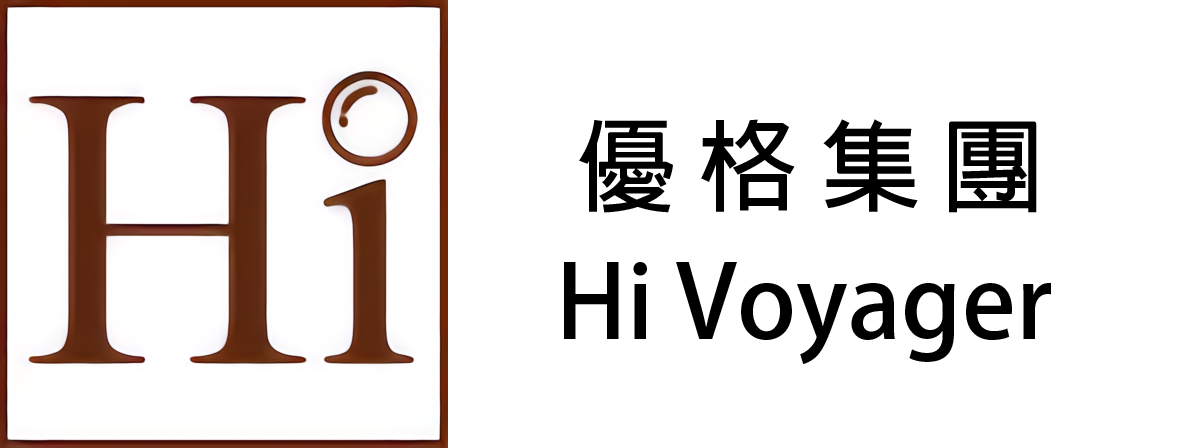
<style>
.page{position:relative;width:1200px;height:448px;background:#ffffff}
.page>*{position:absolute;margin:0}
.t1{font:100px "AdobeFanHeitiStd-Bold";color:#000000}
.t2{font:12px "AdobeFanHeitiStd-Bold";color:#000000}
</style>
<div class="page">
<p class="t1" style="left:579px;top:119px;width:458px;height:94px">優 格 集 團</p>
<p class="t2" style="left:564px;top:262px;width:487px;height:102px">Hi Voyager</p>
</div>
